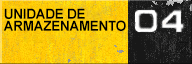
<style>
.page{position:relative;width:192px;height:64px}
.page>*{position:absolute;margin:0}
.t1{font:14px/12px "Arial-BoldMT";letter-spacing:-0.02em;color:#000000;scale:0.96 1}
</style>
<div class="page">
<p class="t1" style="left:3px;top:8px;width:123px;height:23px">UNIDADE DE<br>ARMAZENAMENTO</p>
</div>
